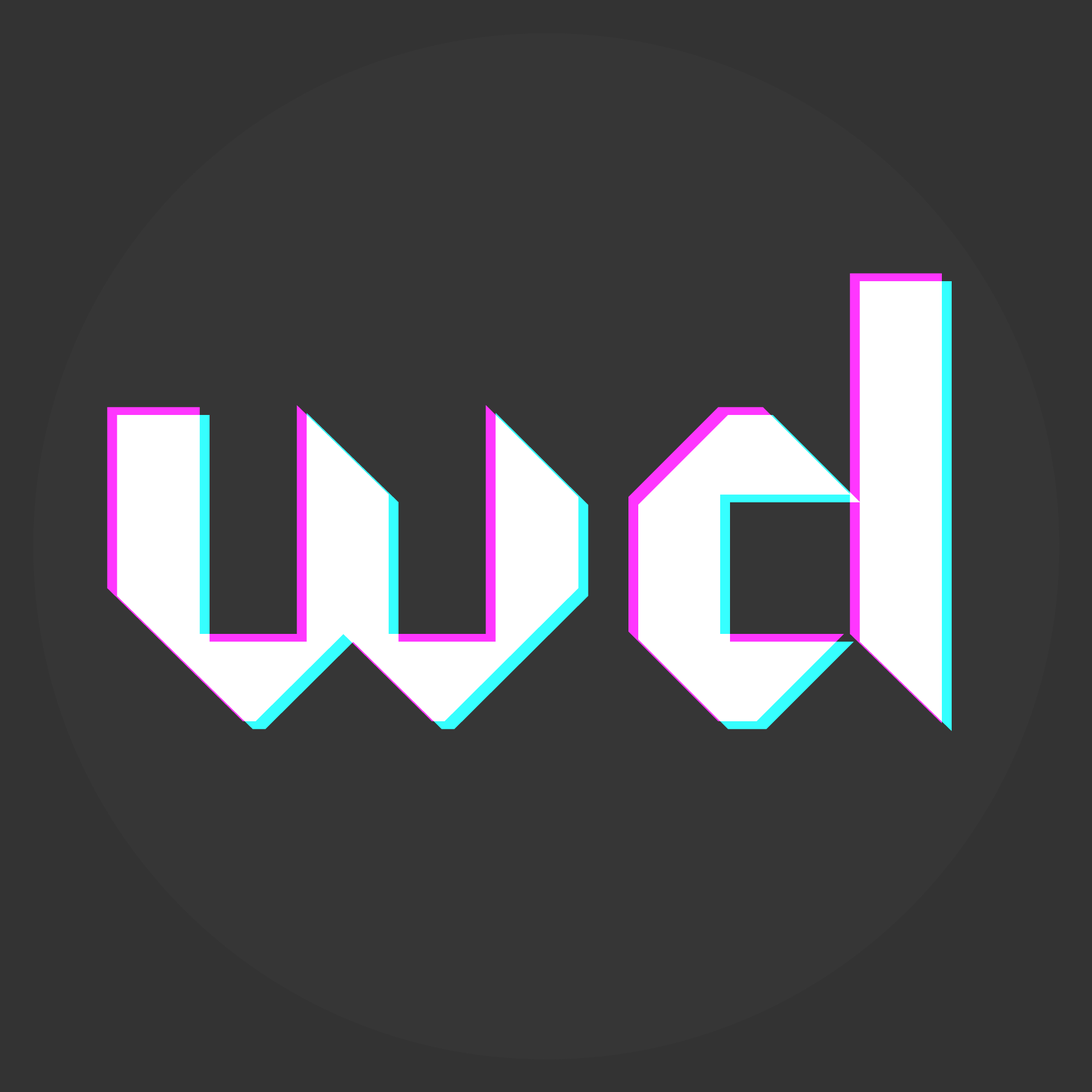
<style>
.page{position:relative;width:1092px;height:1092px;background:#363636}
.page>*{position:absolute;margin:0}
.t1{font:627.9px "Origram";color:#ffffff}
</style>
<div class="page">
<p class="t1" style="left:107px;top:273px;width:835px;height:450px">wd</p>
<p class="t1" style="left:117px;top:281px;width:835px;height:450px">wd</p>
</div>
